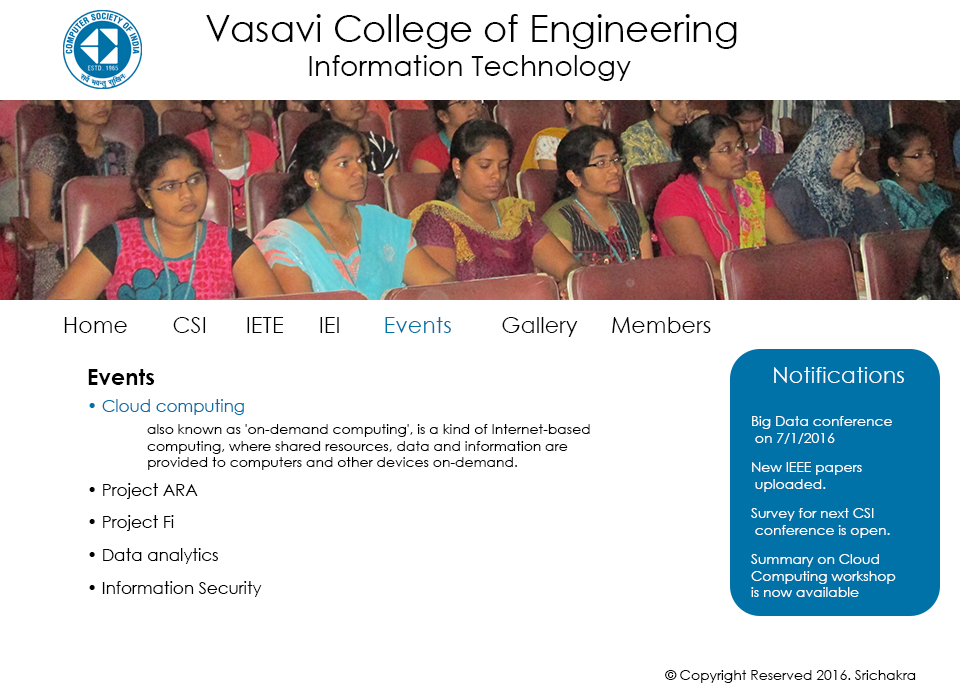
<style>
.page{position:relative;width:960px;height:700px;background:#ffffff}
.page>*{position:absolute;margin:0}
.t1{font:36.6px "CenturyGothic";color:#030303}
.t2{font:28.2px "CenturyGothic";color:#030303}
.t3{font:22.2px "CenturyGothic";color:#030303}
.t4{font:22.2px "CenturyGothic";color:#000000}
.t5{font:22.2px "CenturyGothic";color:#010101}
.t6{font:22.2px "CenturyGothic";color:#0072a8}
.t7{font:22.2px "CenturyGothic-Bold";color:#000000}
.t8{font:22.2px "CenturyGothic";color:#ffffff}
.t9{font:16.7px "CenturyGothic";color:#0072a8}
.t10{font:13.9px "CenturyGothic";color:#000000}
.t11{font:13.9px/16.7px "CenturyGothic";color:#ffffff}
.t12{font:16.7px "CenturyGothic";color:#000000}
.t13{font:13.9px "CenturyGothic";color:#010101}
</style>
<div class="page">
<p class="t1" style="left:206px;top:14px;width:531px;height:35px">Vasavi College of Engineering</p>
<p class="t2" style="left:309px;top:55px;width:322px;height:26px">Information Technology</p>
<p class="t3" style="left:64px;top:317px;width:647px;height:20px"><span class="t4">Home  </span><span class="t5">CSI </span> IETE IEI       <span class="t6">Events</span>  Gallery Members</p>
<p class="t7" style="left:88px;top:369px;width:67px;height:16px">Events</p>
<p class="t8" style="left:774px;top:367px;width:130px;height:16px">Notifications</p>
<p class="t9" style="left:89px;top:399px;width:155px;height:16px">• Cloud computing</p>
<p class="t10" style="left:147px;top:424px;width:443px;height:46px">also known as 'on-demand computing', is a kind of Internet-based<br>computing, where shared resources, data and information are <br>provided to computers and other devices on-demand.</p>
<p class="t11" style="left:752px;top:416px;width:140px;height:28px">Big Data conference<br> on 7/1/2016</p>
<p class="t11" style="left:752px;top:462px;width:110px;height:30px">New IEEE papers <br> uploaded.</p>
<p class="t12" style="left:89px;top:483px;width:109px;height:16px">• Project ARA</p>
<p class="t11" style="left:751px;top:508px;width:139px;height:30px">Survey for next CSI <br> conference is open.</p>
<p class="t12" style="left:89px;top:515px;width:85px;height:16px">• Project Fi</p>
<p class="t12" style="left:89px;top:548px;width:129px;height:16px">• Data analytics</p>
<p class="t11" style="left:751px;top:554px;width:145px;height:43px">Summary on Cloud <br>Computing workshop <br>is now available</p>
<p class="t12" style="left:89px;top:581px;width:173px;height:16px">• Information Security</p>
<p class="t13" style="left:665px;top:670px;width:251px;height:13px">© Copyright Reserved 2016. Srichakra</p>
</div>
